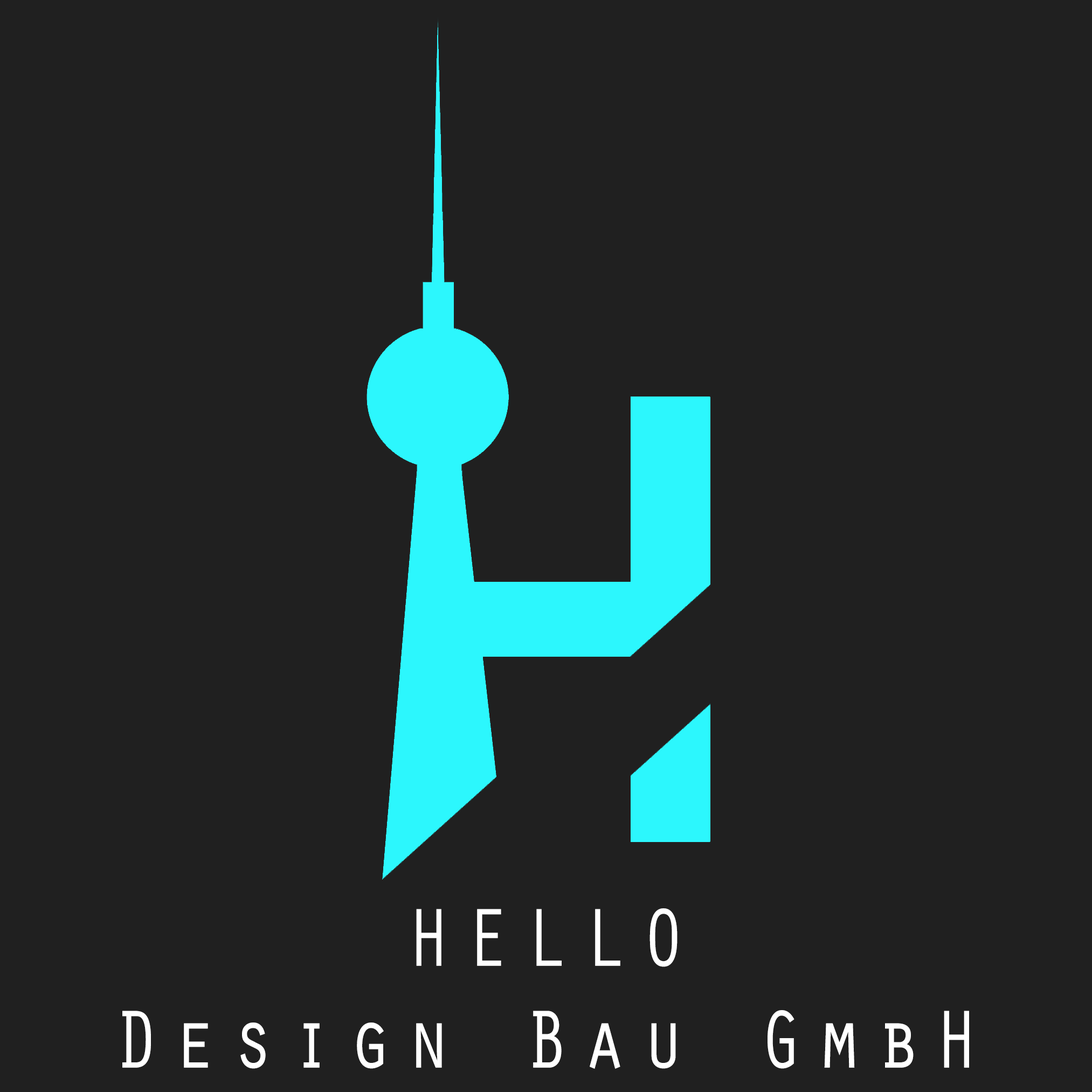
<style>
.page{position:relative;width:1092px;height:1092px;background:#202020}
.page>*{position:absolute;margin:0}
.t1{font:84.8px "OratorStd";letter-spacing:0.2em;color:#ffffff;scale:0.86 1}
</style>
<div class="page">
<p class="t1" style="left:122px;top:909px;width:847px;height:160px;text-align:center">HELLO<br>Design Bau GmbH</p>
</div>
